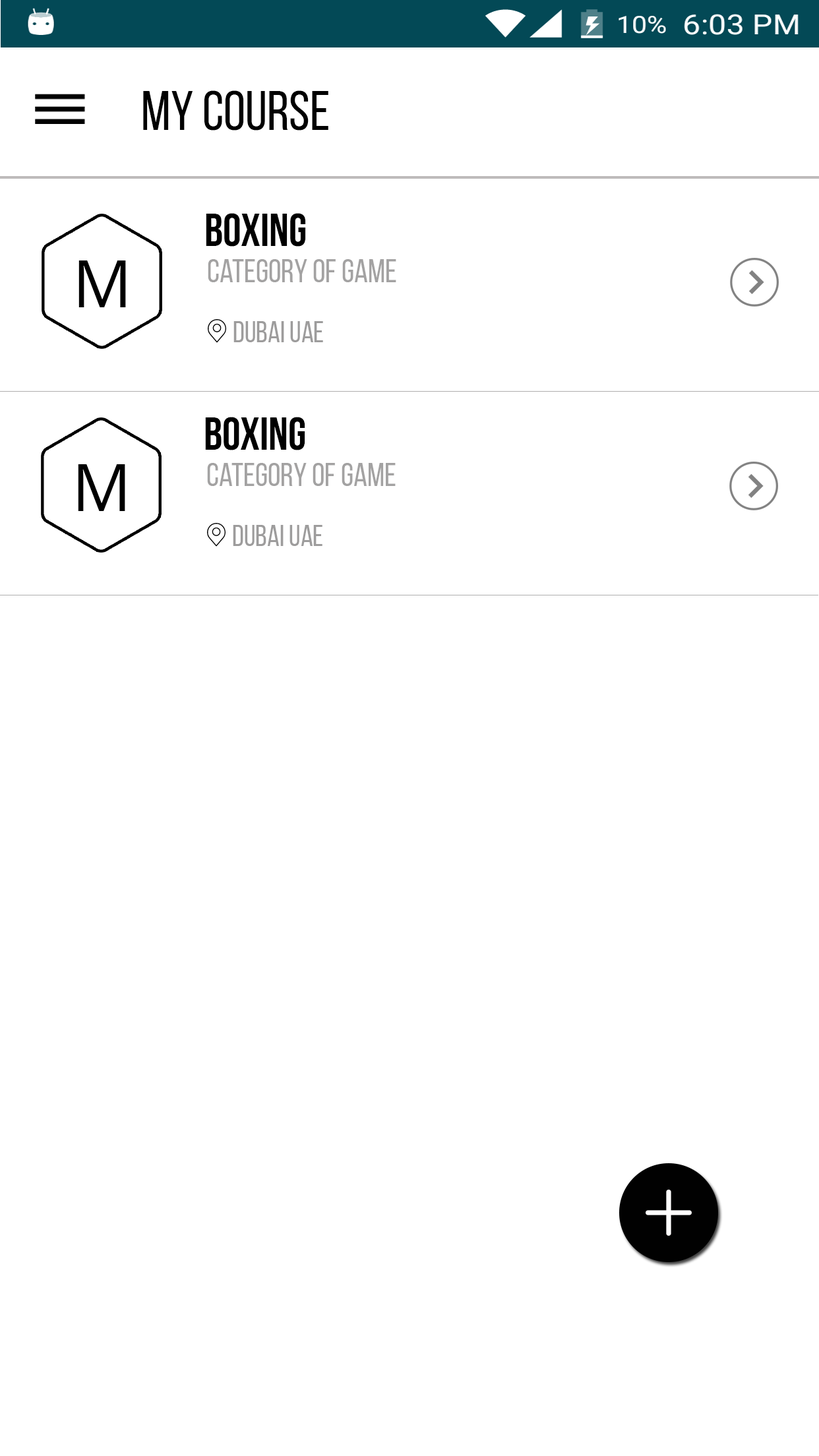
<style>
.page{position:relative;width:819px;height:1456px;background:#ffffff}
.page>*{position:absolute;margin:0}
.t1{font:56px "BebasNeueRegular";color:#010101}
.t2{font:46.2px "TestN-TestNBold";color:#000000}
.t3{font:65.9px "OpenSans";color:#000000}
.t4{font:33px "TestN-TestNRegular";color:#a3a2a2}
.t5{font:29.7px "TestN-TestNRegular";color:#9d9c9c}
</style>
<div class="page">
<p class="t1" style="left:143px;top:90px;width:185px;height:41px">My COurse</p>
<p class="t2" style="left:206px;top:213px;width:100px;height:34px">BOXING</p>
<p class="t3" style="left:78px;top:260px;width:48px;height:47px">M</p>
<p class="t4" style="left:208px;top:259px;width:188px;height:23px">category of game</p>
<p class="t5" style="left:233px;top:321px;width:90px;height:21px">DUBAI UAE</p>
<p class="t2" style="left:205px;top:417px;width:100px;height:33px">BOXING</p>
<p class="t3" style="left:78px;top:464px;width:47px;height:47px">M</p>
<p class="t4" style="left:207px;top:463px;width:189px;height:23px">category of game</p>
<p class="t5" style="left:233px;top:525px;width:89px;height:21px">DUBAI UAE</p>
</div>
